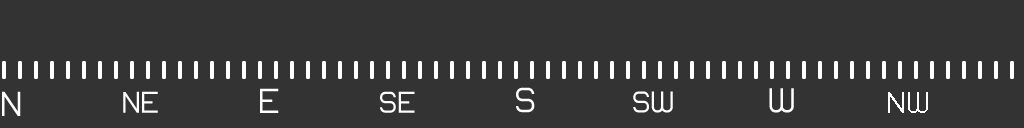
<style>
.page{position:relative;width:1024px;height:128px;background:#333333}
.page>*{position:absolute;margin:0}
.t1{font:35px "Lastwaerkregular";color:#ffffff}
.t2{font:30px "Lastwaerkregular";color:#ffffff}
</style>
<div class="page">
<p class="t1" style="left:260px;top:88px;width:19px;height:25px">E</p>
<p class="t1" style="left:516px;top:87px;width:19px;height:26px">S</p>
<p class="t1" style="left:769px;top:88px;width:25px;height:25px">W</p>
<p class="t1" style="left:2px;top:91px;width:19px;height:25px">N</p>
<p class="t2" style="left:123px;top:91px;width:35px;height:22px">NE</p>
<p class="t2" style="left:380px;top:91px;width:35px;height:22px">SE</p>
<p class="t2" style="left:633px;top:91px;width:40px;height:22px">SW</p>
<p class="t2" style="left:888px;top:92px;width:40px;height:21px">NW</p>
</div>
